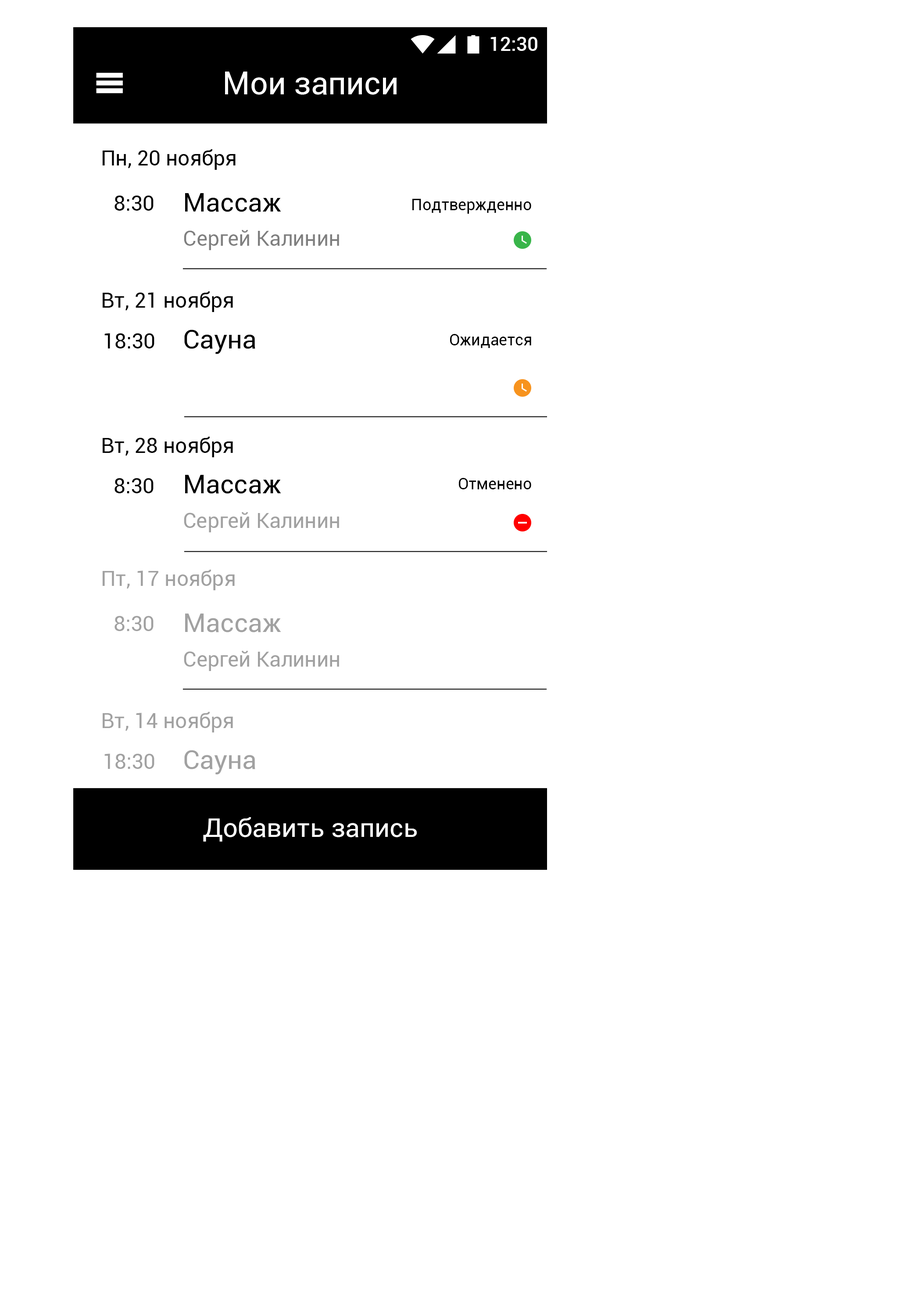
<style>
.page{position:relative;width:923px;height:1292px;background:#ffffff}
.page>*{position:absolute;margin:0}
.t1{font:19.3px "Roboto-Medium";color:#ffffff}
.t2{font:31.6px "Roboto-Regular";color:#ffffff}
.t3{font:21.1px "Roboto-Regular";color:#000000}
.t4{font:26.3px "Roboto-Regular";color:#000000}
.t5{font:15.8px "Roboto-Regular";color:#000000}
.t6{font:21.1px "Roboto-Regular";color:#7f7f7f}
.t7{font:21.1px "Roboto-Regular";color:#a1a1a1}
.t8{font:26.3px "Roboto-Regular";color:#a1a1a1}
.t9{font:26.3px "Roboto-Regular";color:#ffffff}
</style>
<div class="page">
<p class="t1" style="left:491px;top:37px;width:46px;height:14px">12:30</p>
<p class="t2" style="left:225px;top:72px;width:172px;height:23px">Мои записи</p>
<p class="t3" style="left:102px;top:149px;width:134px;height:21px">Пн, 20 ноября</p>
<p class="t3" style="left:115px;top:195px;width:39px;height:16px">8:30</p>
<p class="t4" style="left:185px;top:193px;width:96px;height:19px">Массаж</p>
<p class="t5" style="left:412px;top:199px;width:119px;height:15px">Подтвержденно</p>
<p class="t6" style="left:184px;top:230px;width:155px;height:20px">Сергей Калинин</p>
<p class="t3" style="left:103px;top:291px;width:130px;height:21px">Вт, 21 ноября</p>
<p class="t4" style="left:184px;top:330px;width:71px;height:24px">Сауна</p>
<p class="t3" style="left:104px;top:333px;width:50px;height:15px">18:30</p>
<p class="t5" style="left:450px;top:334px;width:81px;height:14px">Ожидается</p>
<p class="t3" style="left:103px;top:437px;width:130px;height:20px">Вт, 28 ноября</p>
<p class="t3" style="left:115px;top:478px;width:39px;height:15px">8:30</p>
<p class="t4" style="left:185px;top:475px;width:96px;height:19px">Массаж</p>
<p class="t5" style="left:459px;top:478px;width:72px;height:11px">Отменено</p>
<p class="t7" style="left:184px;top:512px;width:155px;height:20px">Сергей Калинин</p>
<p class="t7" style="left:102px;top:570px;width:133px;height:20px">Пт, 17 ноября</p>
<p class="t7" style="left:115px;top:616px;width:39px;height:15px">8:30</p>
<p class="t8" style="left:185px;top:613px;width:96px;height:19px">Массаж</p>
<p class="t7" style="left:184px;top:651px;width:155px;height:20px">Сергей Калинин</p>
<p class="t7" style="left:103px;top:712px;width:130px;height:20px">Вт, 14 ноября</p>
<p class="t8" style="left:184px;top:750px;width:71px;height:24px">Сауна</p>
<p class="t7" style="left:104px;top:753px;width:50px;height:16px">18:30</p>
<p class="t9" style="left:203px;top:817px;width:214px;height:25px">Добавить запись</p>
</div>
